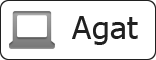
<style>
.page{position:relative;width:156px;height:60px;background:#ffffff}
.page>*{position:absolute;margin:0}
.t1{font:32px "Tahoma";letter-spacing:0.01em;color:#202020}
</style>
<div class="page">
<p class="t1" style="left:72px;top:16px;width:66px;height:29px">Agat</p>
</div>
